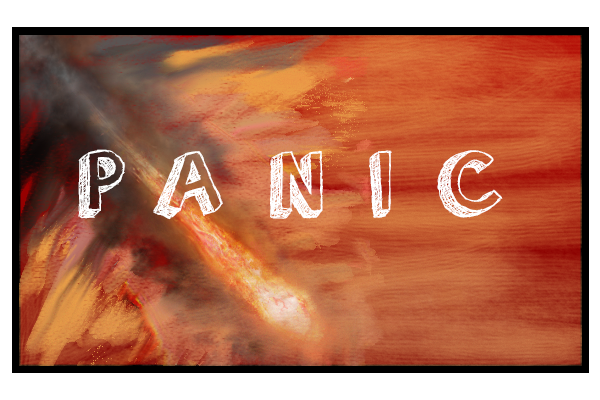
<style>
.page{position:relative;width:600px;height:400px}
.page>*{position:absolute;margin:0}
.t1{font:95px "orangejuice";letter-spacing:0.5em;color:#ffffff;text-transform:uppercase}
</style>
<div class="page">
<p class="t1" style="left:78px;top:149px;width:425px;height:71px">Panic</p>
</div>
